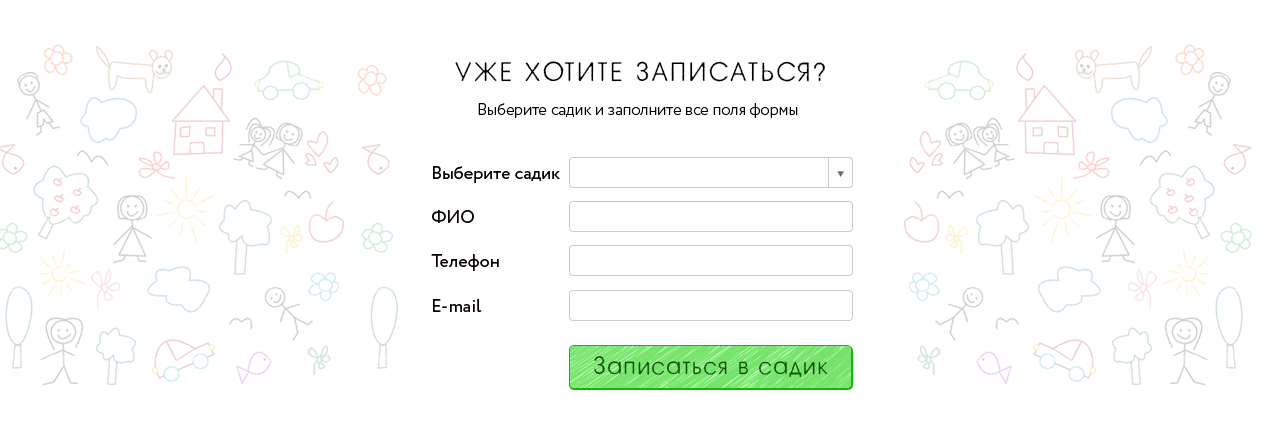
<style>
.page{position:relative;width:1280px;height:447px;background:#ffffff}
.page>*{position:absolute;margin:0}
.t1{font:26px "a_AvanteRough-Light";letter-spacing:0.1em;color:#000000;text-transform:uppercase}
.t2{font:16px "Circe-Light";color:#090000}
.t3{font:18px "Circe-Regular";color:#090000}
.t4{font:24px "a_AvanteRough-Light";letter-spacing:0.07em;color:#085500}
</style>
<div class="page">
<p class="t1" style="left:455px;top:61px;width:370px;height:21px">Уже хотите записаться?</p>
<p class="t2" style="left:478px;top:103px;width:320px;height:15px">Выберите садик и заполните все поля формы</p>
<p class="t3" style="left:433px;top:166px;width:127px;height:17px">Выберите садик</p>
<p class="t3" style="left:432px;top:210px;width:42px;height:13px">ФИО</p>
<p class="t3" style="left:431px;top:254px;width:68px;height:17px">Телефон</p>
<p class="t3" style="left:433px;top:299px;width:49px;height:13px">E-mail</p>
<p class="t4" style="left:594px;top:356px;width:234px;height:21px">Записаться в садик</p>
</div>
